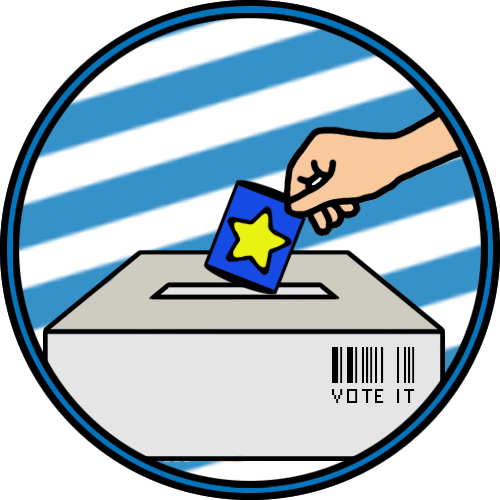
<style>
.page{position:relative;width:500px;height:500px;background:#ffffff}
.page>*{position:absolute;margin:0}
.t1{font:52.4px "Paskowy";color:#000000}
</style>
<div class="page">
<p class="t1" style="left:332px;top:347px;width:83px;height:56px">VOTE IT</p>
</div>
